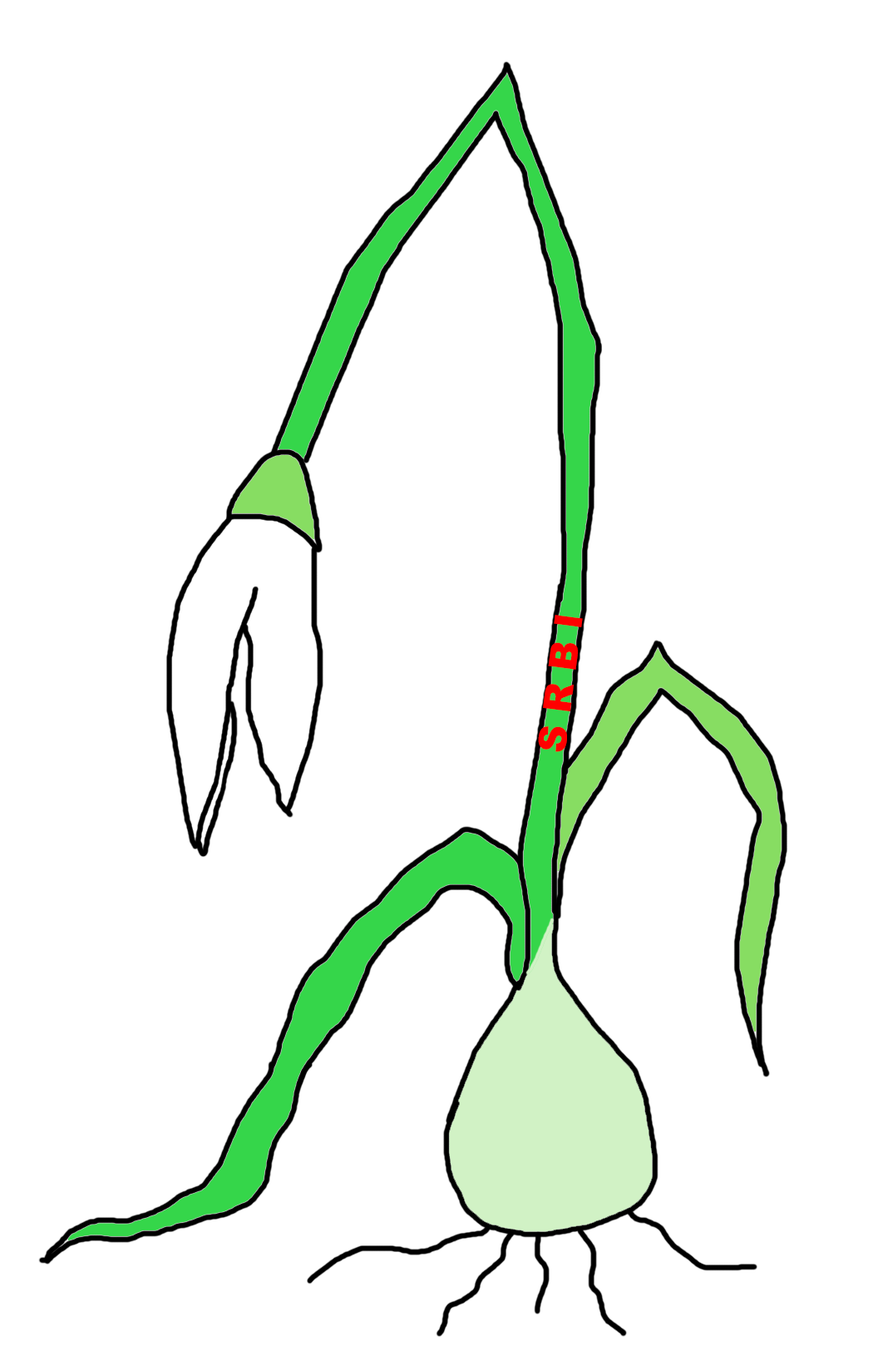
<style>
.page{position:relative;width:873px;height:1366px;background:#ffffff}
.page>*{position:absolute;margin:0}
.t1{font:38.1px "Arial-Black";color:#ff0000}
</style>
<div class="page">
<p class="t1" style="left:538px;top:615px;width:45px;height:137px;rotate:-83deg">S R B I</p>
</div>
